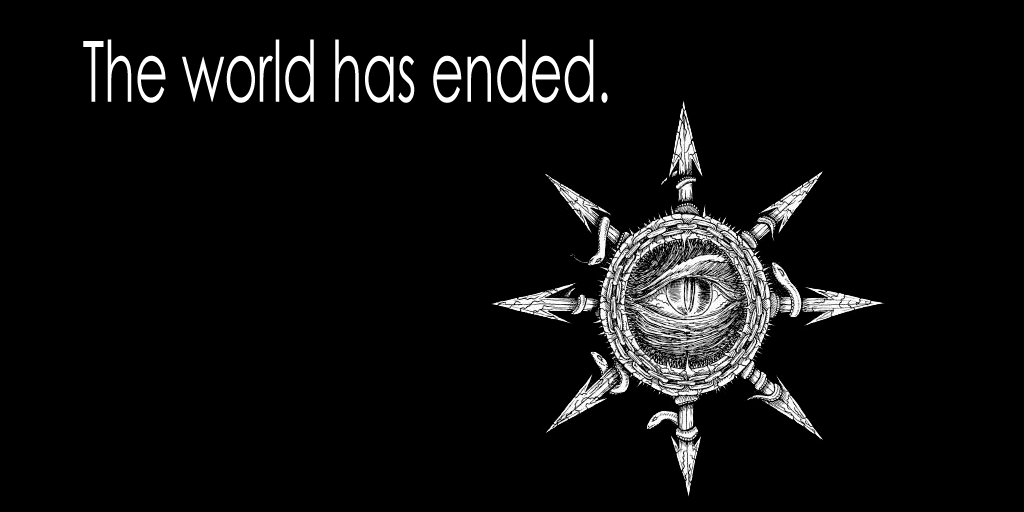
<style>
.page{position:relative;width:1024px;height:512px;background:#000000}
.page>*{position:absolute;margin:0}
.t1{font:84.6px "CenturyGothic";color:#ffffff;scale:0.6 1}
</style>
<div class="page">
<p class="t1" style="left:83px;top:39px;width:525px;height:64px">The world has ended.</p>
</div>
